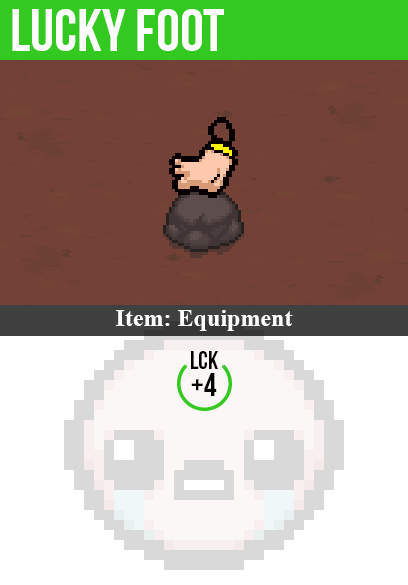
<style>
.page{position:relative;width:408px;height:585px;background:#734136}
.page>*{position:absolute;margin:0}
.t1{font:60px "BebasNeue";color:#ffffff}
.t2{font:24px "TimesNewRomanPS-BoldMT";color:#ffffff}
.t3{font:25px "BebasNeue";color:#000000}
.t4{font:32px "BebasNeue";color:#000000}
</style>
<div class="page">
<p class="t1" style="left:12px;top:9px;width:212px;height:42px">lucky foot</p>
<p class="t2" style="left:116px;top:310px;width:177px;height:21px">Item: Equipment</p>
<p class="t3" style="left:191px;top:351px;width:27px;height:18px">lck</p>
<p class="t4" style="left:191px;top:373px;width:26px;height:23px">+4</p>
</div>
